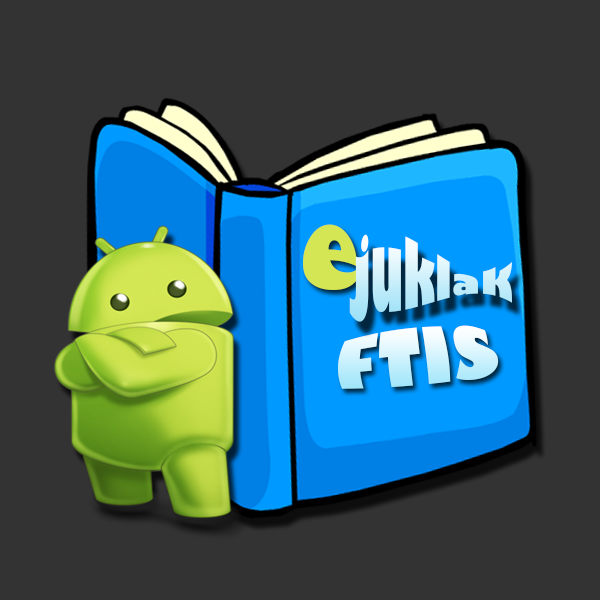
<style>
.page{position:relative;width:600px;height:600px;background:#333333}
.page>*{position:absolute;margin:0}
.t1{font:96px "GillSans-UltraBold";color:#d4e654;scale:0.88 1}
.t2{font:68.2px "GillSans-UltraBold";scale:0.6 1}
.t3{font:62.1px "GillSans-UltraBold";scale:0.83 1}
</style>
<div class="page">
<p class="t1" style="left:303px;top:224px;width:54px;height:66px">e</p>
<p class="t2" style="left:349px;top:234px;width:163px;height:88px">juklak</p>
<p class="t3" style="left:337px;top:325px;width:162px;height:64px;rotate:-5deg">FTIS</p>
</div>
